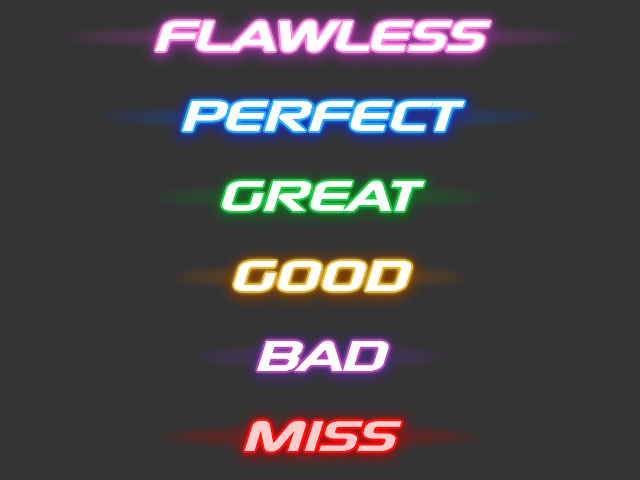
<style>
.page{position:relative;width:640px;height:480px;background:#333333}
.page>*{position:absolute;margin:0}
.t1{font:42px "ModaerneBold";letter-spacing:-0.025em;color:#ffffff;text-transform:uppercase;font-style:italic;scale:1.8 1}
.t2{font:42px "ModaerneBold";letter-spacing:-0.025em;color:#ffcccc;text-transform:uppercase;font-style:italic;scale:1.8 1}
</style>
<div class="page">
<p class="t1" style="left:155px;top:20px;width:336px;height:32px">Flawless</p>
<p class="t1" style="left:182px;top:101px;width:283px;height:30px">Perfect</p>
<p class="t1" style="left:222px;top:180px;width:203px;height:31px">Great</p>
<p class="t1" style="left:234px;top:261px;width:178px;height:30px">Good</p>
<p class="t1" style="left:257px;top:340px;width:132px;height:31px">Bad</p>
<p class="t2" style="left:244px;top:420px;width:158px;height:32px">Miss</p>
</div>
